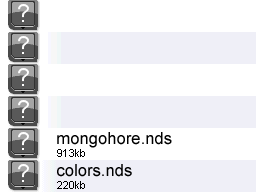
<style>
.page{position:relative;width:256px;height:192px;background:#ffffff}
.page>*{position:absolute;margin:0}
.t1{font:16.7px "ArialMT";color:#000000}
.t2{font:11.1px "ArialMT";color:#000000}
</style>
<div class="page">
<p class="t1" style="left:57px;top:132px;width:115px;height:16px">mongohore.nds</p>
<p class="t2" style="left:57px;top:149px;width:28px;height:8px">913kb</p>
<p class="t1" style="left:57px;top:164px;width:75px;height:13px">colors.nds</p>
<p class="t2" style="left:57px;top:181px;width:28px;height:8px">220kb</p>
</div>
